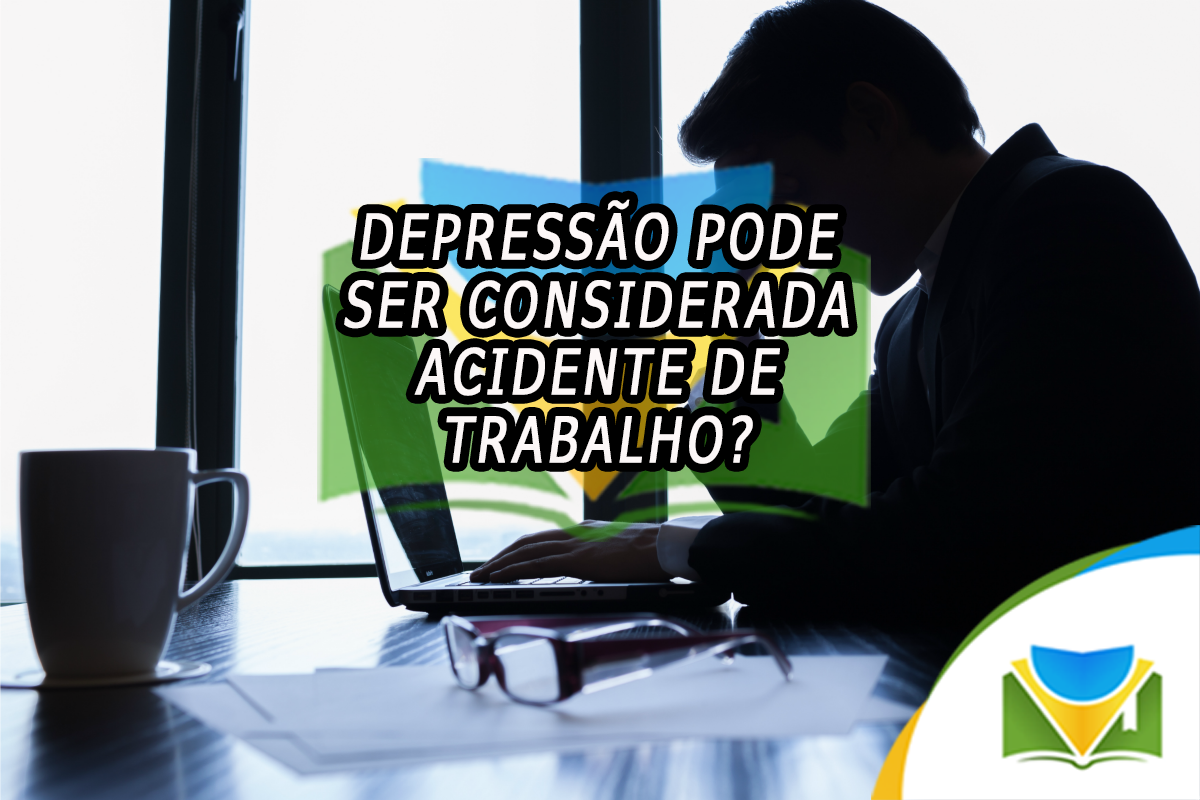
<style>
.page{position:relative;width:1200px;height:800px}
.page>*{position:absolute;margin:0}
.t1{font:63px/33.8px "Tahoma";letter-spacing:0.1em;color:#fdf8f8;text-transform:uppercase;font-weight:bold;font-style:italic;scale:0.76 1}
</style>
<div class="page">
<p class="t1" style="left:344px;top:199px;width:505px;height:265px;text-align:center">Depressão pode <br><br>ser considerada <br><br>acidente de <br><br>trabalho?</p>
</div>
